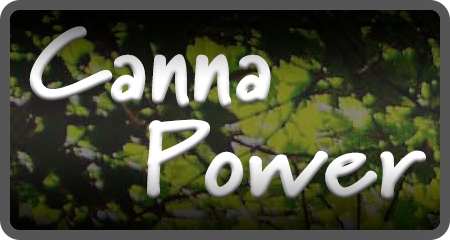
<style>
.page{position:relative;width:450px;height:240px}
.page>*{position:absolute;margin:0}
.t1{font:108.1px "MarydaleBlack";color:#ebebeb}
.t2{font:108px "MarydaleBlack"}
</style>
<div class="page">
<p class="t1" style="left:29px;top:26px;width:242px;height:82px">Canna</p>
<p class="t2" style="left:147px;top:119px;width:279px;height:81px">Power</p>
</div>
